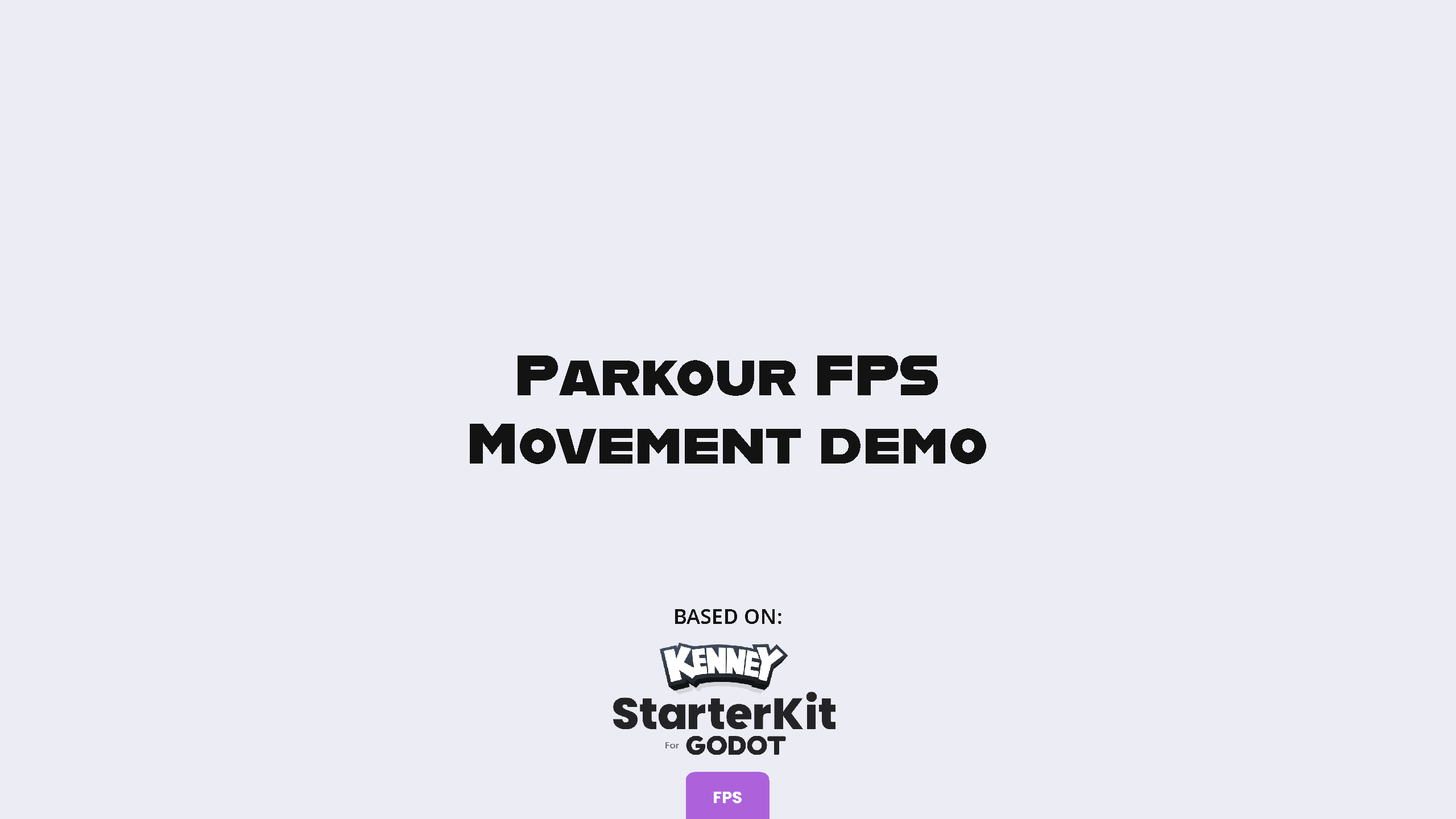
<style>
.page{position:relative;width:1456px;height:819px;background:#ececf5}
.page>*{position:absolute;margin:0}
.t1{font:56.9px "Alfarn";letter-spacing:0.01em;color:#131313}
.t2{font:20.5px "OpenSans-Semibold";letter-spacing:0.01em;color:#131313}
</style>
<div class="page">
<p class="t1" style="left:470px;top:355px;width:516px;height:109px;text-align:center">Parkour FPS<br>Movement demo</p>
<p class="t2" style="left:675px;top:609px;width:106px;height:15px">BASED ON:</p>
</div>
